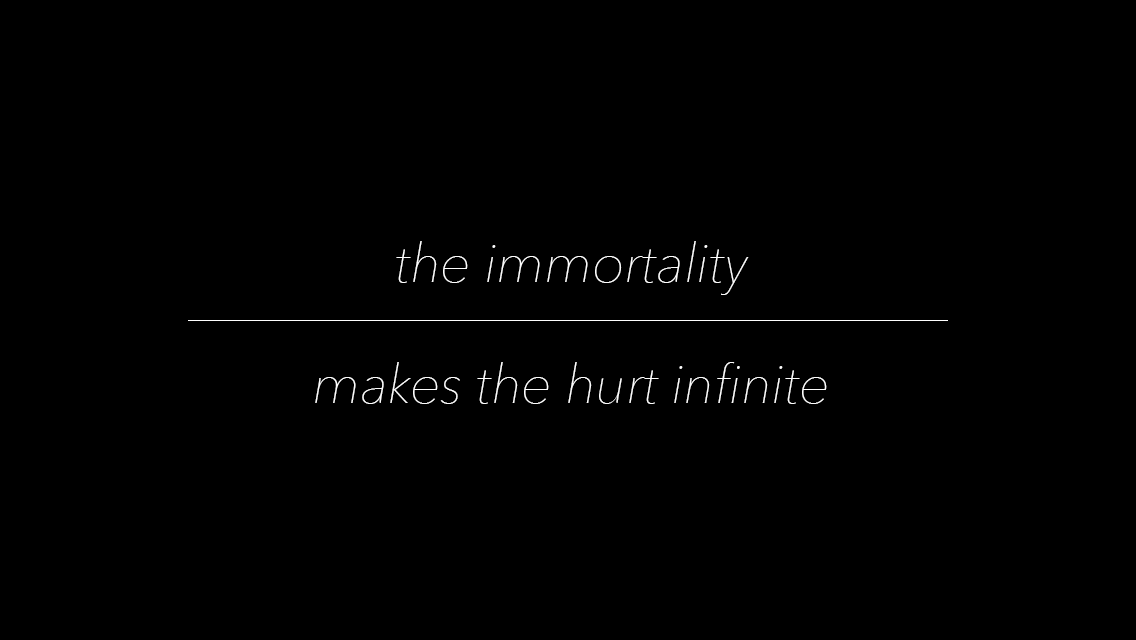
<style>
.page{position:relative;width:1136px;height:640px;background:#000000}
.page>*{position:absolute;margin:0}
.t1{font:54px "AvenirNext-UltraLightItalic";color:#fdfdfd}
</style>
<div class="page">
<p class="t1" style="left:396px;top:241px;width:353px;height:54px">the immortality</p>
<p class="t1" style="left:315px;top:362px;width:512px;height:42px">makes the hurt infinite</p>
</div>
